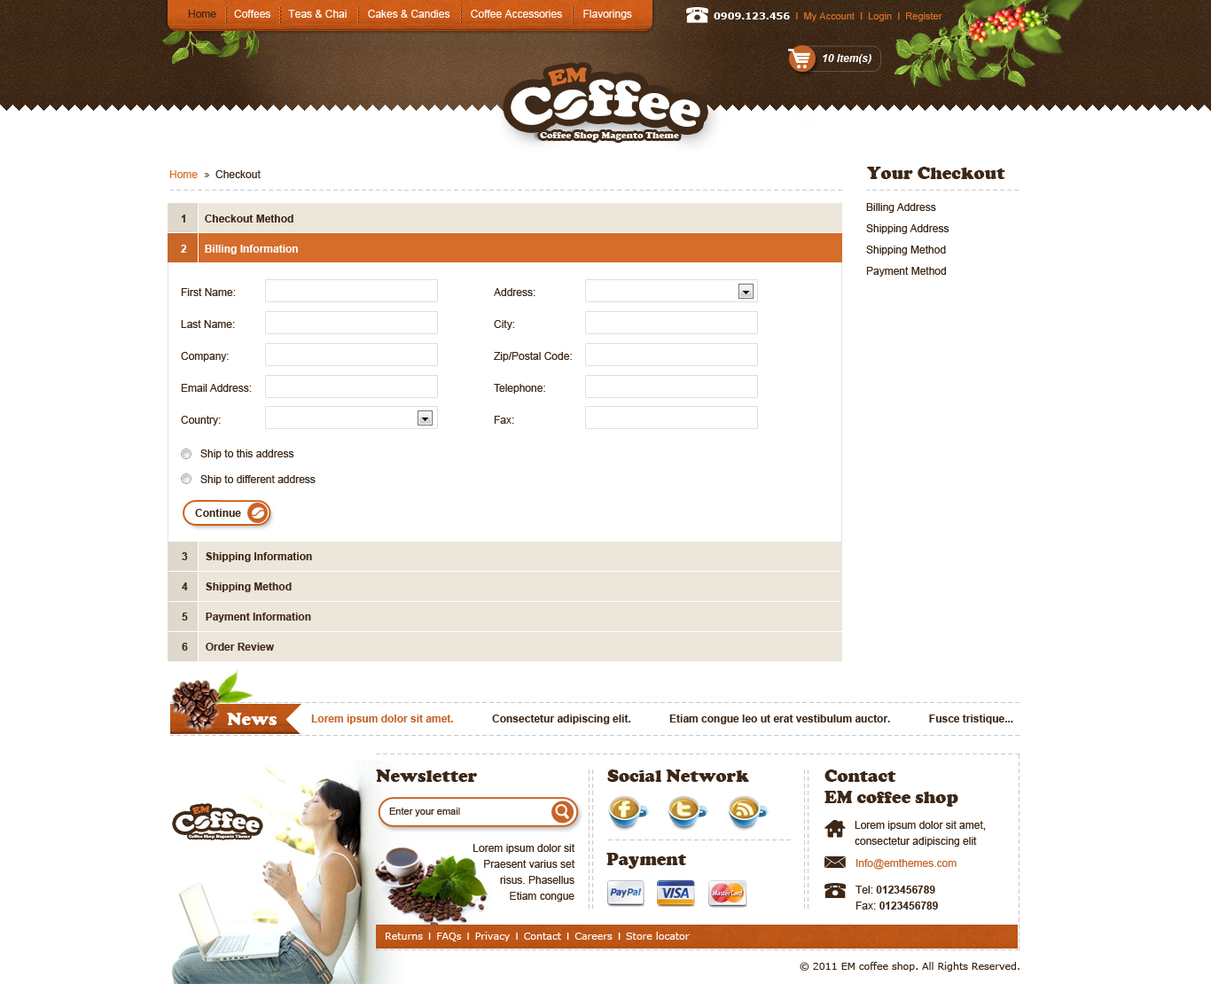
<style>
.page{position:relative;width:1211px;height:984px;background:#ffffff}
.page>*{position:absolute;margin:0}
.t1{font:10.6px "ArialMT";color:#fefefe}
.t2{font:10.6px "ArialMT";color:#3d2817}
.t3{font:9.8px "ArialMT";color:#d56d2b}
.t4{font:9.8px "Verdana-Bold";color:#ffffff}
.t5{font:10.6px "Arial-BoldItalicMT";color:#ffffff}
.t6{font:10.6px "ArialMT";color:#d56d2b}
.t7{font:17.7px "CooperBlack";color:#3d2817}
.t8{font:10.6px/21.3px "ArialMT";color:#3d2817}
.t9{font:10.6px/30.2px "Arial-BoldMT";color:#ffffff}
.t10{font:10.6px/26.6px "Arial-BoldMT";color:#3d2817}
.t11{font:10.6px/31.9px "ArialMT";color:#3d2817}
.t12{font:10.6px "ArialMT";color:#3c3c3c}
.t13{font:10.6px "Arial-BoldMT";color:#3d2817}
.t14{font:10.6px/30.2px "Arial-BoldMT";color:#3d2817}
.t15{font:10.6px/30.2px "Arial-BoldMT";color:#333333}
.t16{font:17.7px "CooperBlack";color:#ffffff}
.t17{font:10.6px "Arial-BoldMT";color:#c26529}
.t18{font:17.7px/21.3px "CooperBlack";color:#3d2817}
.t19{font:9.8px "ArialMT";color:#3d2817}
.t20{font:10.6px/16px "ArialMT";color:#3d2817}
.t21{font:10.6px/26.6px "ArialMT";color:#c26529}
.t22{font:10.6px/26.6px "ArialMT";color:#3d2817}
.t23{font:10.6px/16px "Arial-BoldMT";color:#3d2817}
.t24{font:9.8px "Verdana";color:#ffffff}
.t25{font:9.8px "ArialMT";color:#ffffff}
.t26{font:9.8px "Verdana";color:#3d2817}
</style>
<div class="page">
<p class="t1" style="left:188px;top:10px;width:444px;height:10px"><span class="t2">Home</span>      Coffees      Teas &amp; Chai       Cakes &amp; Candies       Coffee Accessories       Flavorings</p>
<p class="t3" style="left:714px;top:12px;width:229px;height:9px"><span class="t4">0909.123.456</span>  I  My Account  I  Login  I  Register</p>
<p class="t5" style="left:823px;top:54px;width:49px;height:10px">10 Item(s)</p>
<p class="t2" style="left:169px;top:170px;width:92px;height:8px"><span class="t6">Home</span>      Checkout</p>
<p class="t7" style="left:867px;top:167px;width:139px;height:12px">Your Checkout</p>
<p class="t8" style="left:866px;top:203px;width:84px;height:74px">Billing Address<br>Shipping Address<br>Shipping Method<br>Payment Method</p>
<p class="t9" style="left:181px;top:215px;width:117px;height:40px"><span class="t10">1      Checkout Method<br></span>2      Billing Information</p>
<p class="t11" style="left:181px;top:288px;width:71px;height:138px">First Name:<br>Last Name:<br>Company:<br>Email Address:<br>Country:</p>
<p class="t11" style="left:494px;top:288px;width:78px;height:136px">Address:<br>City:<br>Zip/Postal Code:<br>Telephone:<br>Fax:</p>
<p class="t2" style="left:200px;top:450px;width:116px;height:35px"><span class="t12"> </span>Ship to this address <br><br> Ship to different address</p>
<p class="t13" style="left:195px;top:509px;width:46px;height:8px">Continue</p>
<p class="t14" style="left:182px;top:552px;width:130px;height:99px"><span class="t15"><br></span>3      Shipping Information<br>4      Shipping Method<br>5      Payment Information<br>6      Order Review</p>
<p class="t16" style="left:227px;top:713px;width:50px;height:12px">News</p>
<p class="t13" style="left:311px;top:715px;width:703px;height:10px"><span class="t17">Lorem ipsum dolor sit amet.</span>             Consectetur adipiscing elit.             Etiam congue leo ut erat vestibulum auctor.             Fusce tristique...</p>
<p class="t7" style="left:376px;top:770px;width:101px;height:12px">Newsletter</p>
<p class="t7" style="left:607px;top:770px;width:142px;height:12px">Social Network</p>
<p class="t18" style="left:825px;top:770px;width:134px;height:37px">Contact<br>EM coffee shop</p>
<p class="t19" style="left:389px;top:808px;width:71px;height:9px">Enter your email</p>
<p class="t20" style="left:855px;top:821px;width:131px;height:26px">Lorem ipsum dolor sit amet, <br>consectetur adipiscing elit</p>
<p class="t20" style="left:474px;top:844px;width:101px;height:58px;text-align:right">Lorem ipsum dolor sit<br>Praesent varius set<br>risus. Phasellus<br>Etiam congue</p>
<p class="t7" style="left:607px;top:853px;width:79px;height:16px">Payment</p>
<p class="t21" style="left:856px;top:859px;width:101px;height:51px">Info@emthemes.com<br><span class="t22">Tel: </span><span class="t10">0123456789<br></span><span class="t20">Fax: </span><span class="t23">0123456789</span></p>
<p class="t24" style="left:386px;top:932px;width:304px;height:10px">Returns<span class="t25">  I  </span>FAQs<span class="t25">  I  </span>Privacy<span class="t25">  I  </span>Contact<span class="t25">  I  </span>Careers<span class="t25">  I  </span>Store locator</p>
<p class="t26" style="left:800px;top:962px;width:220px;height:10px">© 2011 EM coffee shop. All Rights Reserved.</p>
</div>
